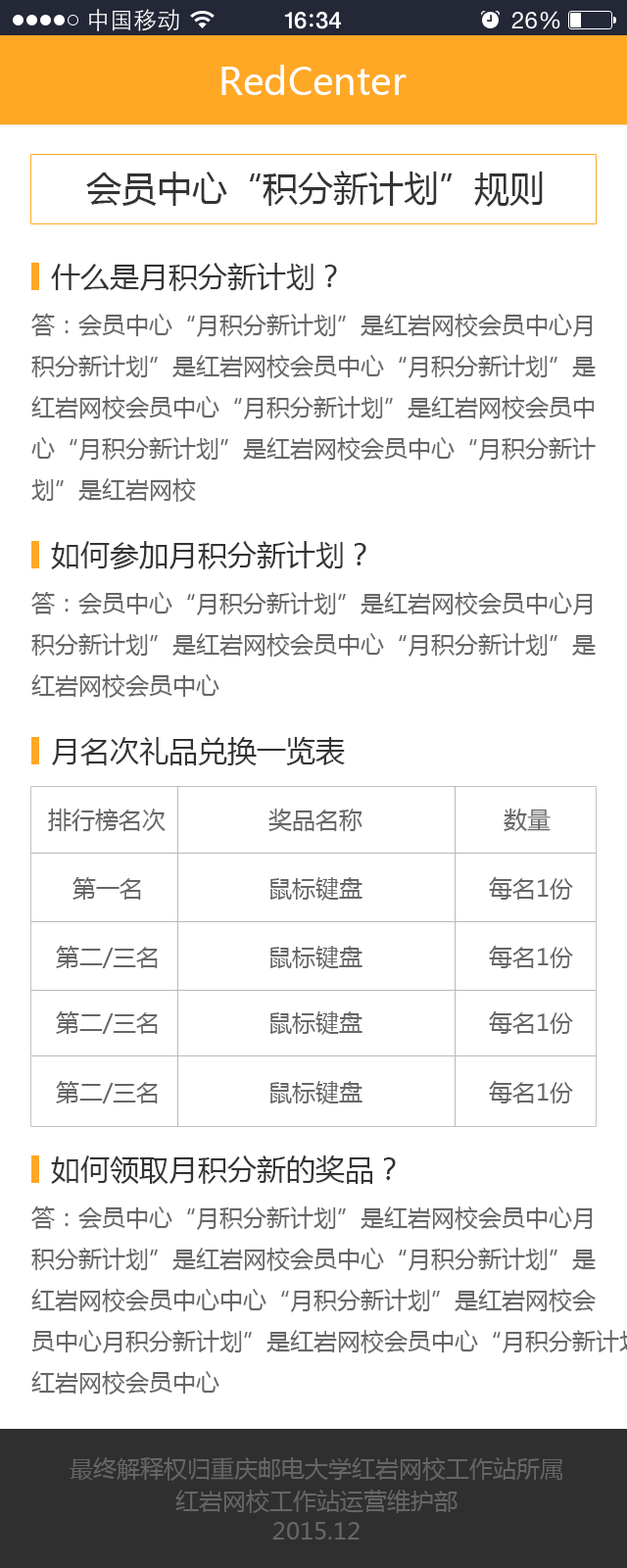
<style>
.page{position:relative;width:627px;height:1568px;background:#ffffff}
.page>*{position:absolute;margin:0}
.t1{font:37.2px "MicrosoftYaHei";color:#ffffff}
.t2{font:35.3px "MicrosoftYaHei";color:#333333}
.t3{font:29.4px "MicrosoftYaHei";color:#333333}
.t4{font:23.5px "MicrosoftYaHei";color:#666666}
.t5{font:23.5px/30.4px "MicrosoftYaHei";color:#666666}
</style>
<div class="page">
<p class="t1" style="left:221px;top:65px;width:186px;height:30px">RedCenter</p>
<p class="t2" style="left:86px;top:171px;width:457px;height:36px">会员中心“积分新计划”规则</p>
<p class="t3" style="left:51px;top:263px;width:286px;height:28px">什么是月积分新计划？</p>
<p class="t4" style="left:31px;top:314px;width:565px;height:188px">答：会员中心“月积分新计划”是红岩网校会员中心月<br>积分新计划”是红岩网校会员中心“月积分新计划”是<br>红岩网校会员中心“月积分新计划”是红岩网校会员中<br>心“月积分新计划”是红岩网校会员中心“月积分新计<br>划”是红岩网校</p>
<p class="t3" style="left:51px;top:541px;width:316px;height:28px">如何参加月积分新计划？</p>
<p class="t4" style="left:31px;top:592px;width:565px;height:106px">答：会员中心“月积分新计划”是红岩网校会员中心月<br>积分新计划”是红岩网校会员中心“月积分新计划”是<br>红岩网校会员中心</p>
<p class="t3" style="left:52px;top:737px;width:293px;height:28px">月名次礼品兑换一览表</p>
<p class="t4" style="left:48px;top:808px;width:118px;height:23px">排行榜名次</p>
<p class="t4" style="left:269px;top:808px;width:94px;height:23px">奖品名称</p>
<p class="t4" style="left:504px;top:808px;width:47px;height:23px">数量</p>
<p class="t4" style="left:73px;top:877px;width:68px;height:23px">第一名</p>
<p class="t4" style="left:270px;top:877px;width:93px;height:24px">鼠标键盘</p>
<p class="t4" style="left:489px;top:877px;width:84px;height:23px">每名1份</p>
<p class="t4" style="left:56px;top:946px;width:102px;height:22px">第二/三名</p>
<p class="t4" style="left:270px;top:946px;width:93px;height:23px">鼠标键盘</p>
<p class="t4" style="left:489px;top:946px;width:84px;height:22px">每名1份</p>
<p class="t4" style="left:56px;top:1011px;width:102px;height:23px">第二/三名</p>
<p class="t4" style="left:270px;top:1011px;width:93px;height:24px">鼠标键盘</p>
<p class="t4" style="left:489px;top:1011px;width:84px;height:23px">每名1份</p>
<p class="t4" style="left:56px;top:1081px;width:102px;height:22px">第二/三名</p>
<p class="t4" style="left:270px;top:1081px;width:93px;height:23px">鼠标键盘</p>
<p class="t4" style="left:489px;top:1081px;width:84px;height:22px">每名1份</p>
<p class="t3" style="left:51px;top:1155px;width:345px;height:29px">如何领取月积分新的奖品？</p>
<p class="t4" style="left:70px;top:1457px;width:493px;height:24px">最终解释权归重庆邮电大学红岩网校工作站所属</p>
<p class="t5" style="left:175px;top:1490px;width:283px;height:50px;text-align:center">红岩网校工作站运营维护部<br>2015.12</p>
</div>
